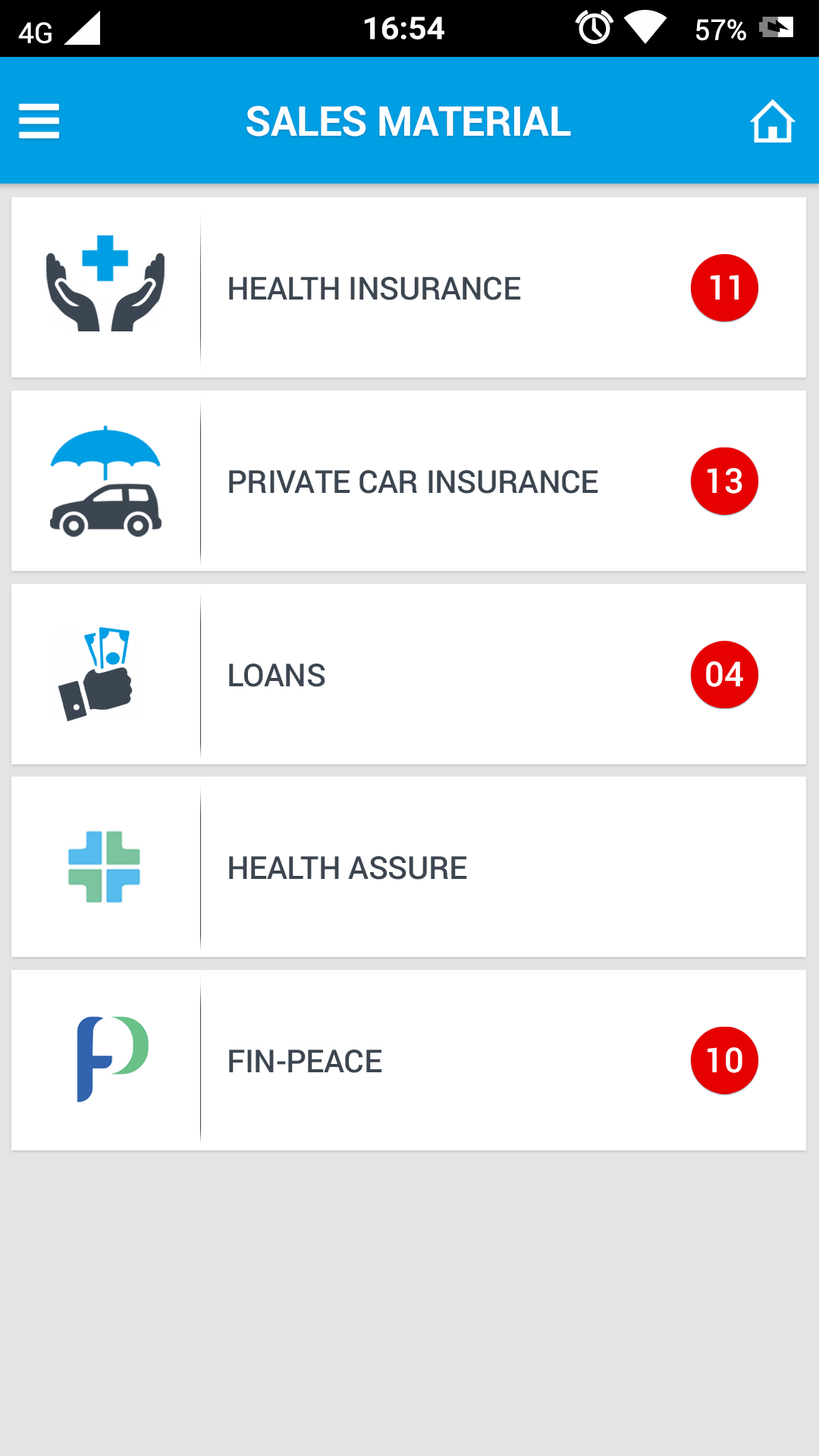
<style>
.page{position:relative;width:819px;height:1456px;background:#ffffff}
.page>*{position:absolute;margin:0}
.t1{font:41.1px "Roboto-Bold";letter-spacing:-0.01em;color:#ffffff}
.t2{font:31.6px "Roboto-Medium";letter-spacing:-0.01em;color:#3c4651}
.t3{font:34.4px "Roboto-Medium";letter-spacing:-0.01em;color:#ffffff}
</style>
<div class="page">
<p class="t1" style="left:246px;top:105px;width:325px;height:31px">SALES MATERIAL</p>
<p class="t2" style="left:229px;top:277px;width:292px;height:23px">HEALTH INSURANCE</p>
<p class="t3" style="left:711px;top:275px;width:28px;height:25px">11</p>
<p class="t2" style="left:229px;top:470px;width:369px;height:24px">PRIVATE CAR INSURANCE</p>
<p class="t3" style="left:708px;top:468px;width:34px;height:26px">13</p>
<p class="t2" style="left:229px;top:664px;width:96px;height:23px">LOANS</p>
<p class="t3" style="left:706px;top:661px;width:37px;height:26px">04</p>
<p class="t2" style="left:229px;top:856px;width:238px;height:24px">HEALTH ASSURE</p>
<p class="t2" style="left:229px;top:1050px;width:153px;height:23px">FIN-PEACE</p>
<p class="t3" style="left:708px;top:1047px;width:34px;height:26px">10</p>
</div>
